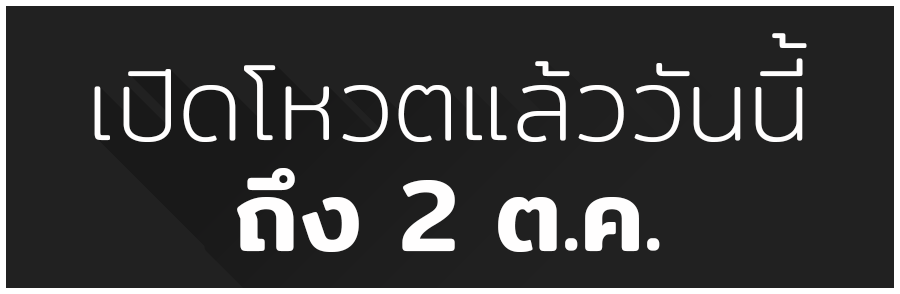
<style>
.page{position:relative;width:900px;height:294px;background:#212121}
.page>*{position:absolute;margin:0}
.t1{font:102.4px/138.7px "Mitr-ExtraLight";color:#fffefe}
.t2{font:102.4px/138.7px "Mitr-Medium";color:#fffefe}
</style>
<div class="page">
<p class="t1" style="left:94px;top:33px;width:713px;height:219px;text-align:center">เปิดโหวตแล้ววันนี้<br><span class="t2">ถึง 2 ต.ค.</span></p>
</div>
